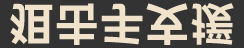
<style>
.page{position:relative;width:244px;height:48px;background:#333333}
.page>*{position:absolute;margin:0}
.t1{font:45px "HarmonyOS_Sans_SC_Bold";letter-spacing:0.005em;color:#f1e3cb}
</style>
<div class="page">
<p class="t1" style="left:10px;top:3px;width:224px;height:42px">狙击手支援</p>
</div>
